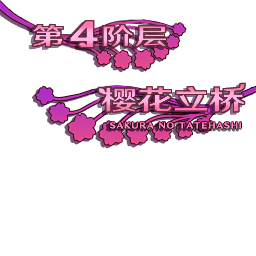
<style>
.page{position:relative;width:256px;height:256px;background:#ffffff}
.page>*{position:absolute;margin:0}
.t1{font:23.5px "HYWenHei-HEW";letter-spacing:0.052em;scale:1.38 1}
.t2{font:36px "HYWenHei-HEW";letter-spacing:0.052em;scale:1.38 1}
.t3{font:27.1px "HYWenHei-HEW";scale:1.33 1}
</style>
<div class="page">
<p class="t1" style="left:32px;top:24px;width:134px;height:23px">第   阶层</p>
<p class="t2" style="left:70px;top:21px;width:28px;height:27px">4</p>
<p class="t3" style="left:101px;top:87px;width:144px;height:25px">樱花立桥</p>
</div>
